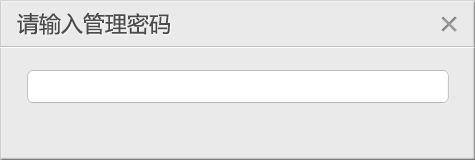
<style>
.page{position:relative;width:475px;height:160px;background:#eaeaea}
.page>*{position:absolute;margin:0}
.t1{font:22px "MicrosoftYaHei";color:#4b4b4b}
</style>
<div class="page">
<p class="t1" style="left:17px;top:13px;width:153px;height:22px">请输入管理密码</p>
</div>
